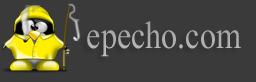
<style>
.page{position:relative;width:256px;height:82px;background:#3a3a3a}
.page>*{position:absolute;margin:0}
.t1{font:57.6px "MicrosoftHimalaya";color:#afafaf;scale:0.83 1}
</style>
<div class="page">
<p class="t1" style="left:87px;top:21px;width:154px;height:36px">epecho.com</p>
</div>
